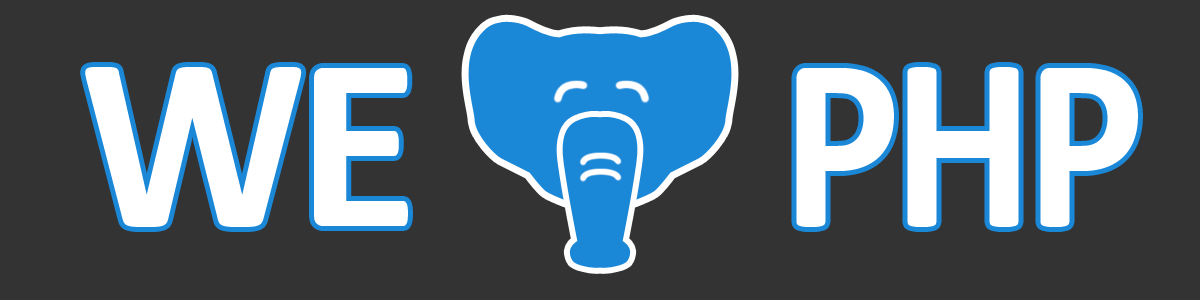
<style>
.page{position:relative;width:1200px;height:300px;background:#333333}
.page>*{position:absolute;margin:0}
.t1{font:250px "Calibri-Bold";letter-spacing:-0.04em;color:#ffffff;scale:0.9 1}
.t2{font:250px "Calibri-Bold";letter-spacing:-0.04em;color:#ffffff}
</style>
<div class="page">
<p class="t1" style="left:85px;top:67px;width:1053px;height:160px"><span class="t2">WE        </span>PHP</p>
</div>
